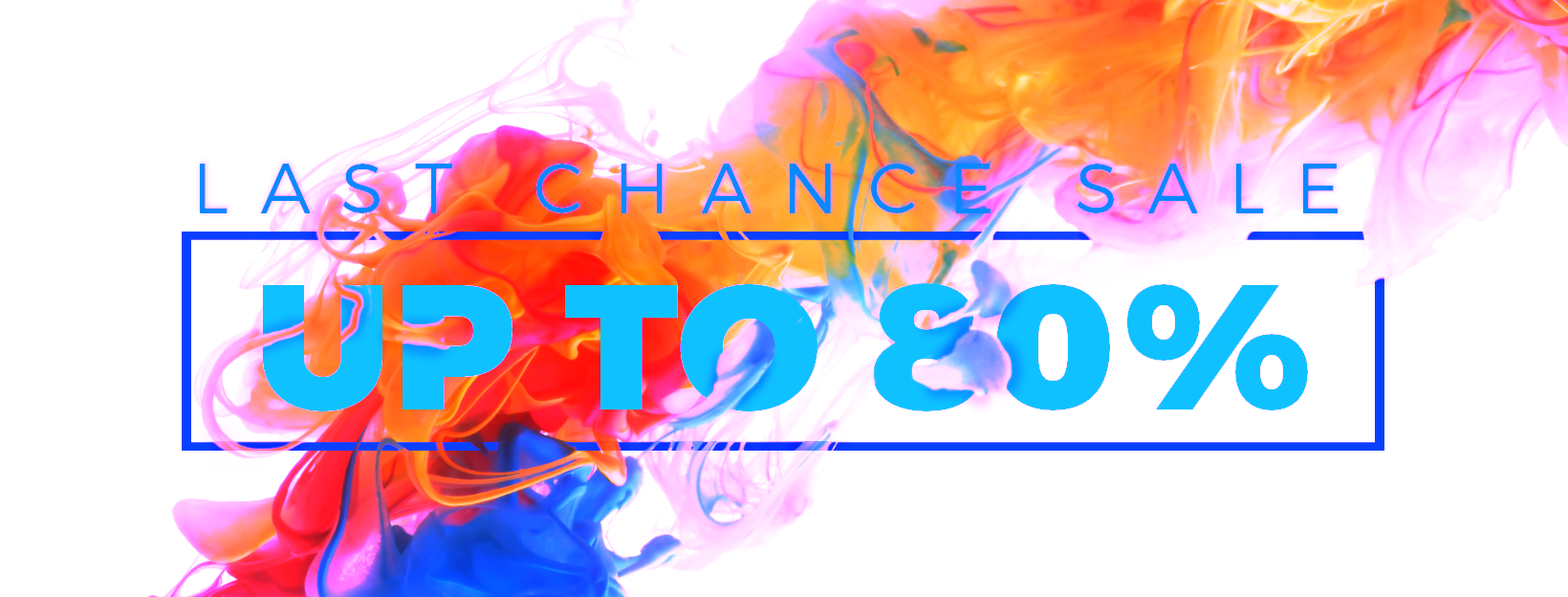
<style>
.page{position:relative;width:1568px;height:597px;background:#ffffff}
.page>*{position:absolute;margin:0}
.t1{font:70.8px "Montserrat-Light";letter-spacing:0.43em;color:#0592ff;text-transform:uppercase}
.t2{font:177.8px "Montserrat-Black";letter-spacing:0.03em;color:#05c7ff;text-transform:uppercase}
</style>
<div class="page">
<p class="t1" style="left:200px;top:163px;width:1138px;height:50px">Last Chance sale</p>
<p class="t2" style="left:262px;top:283px;width:1046px;height:129px">Up To 80%</p>
</div>
